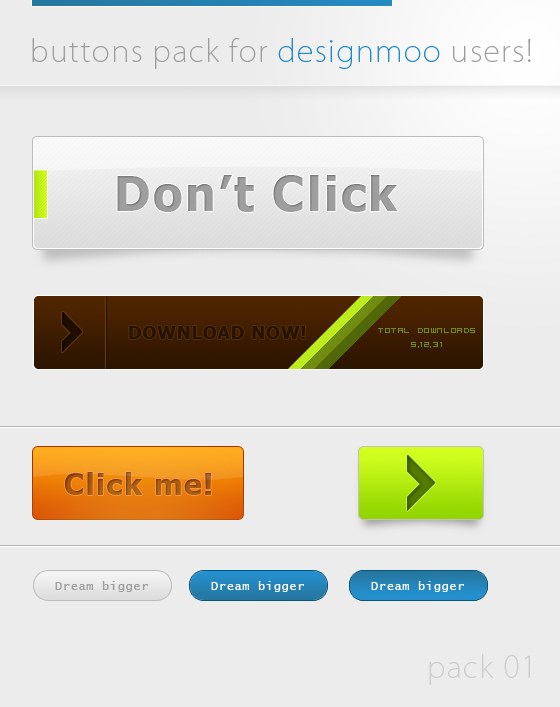
<style>
.page{position:relative;width:560px;height:707px;background:#ececec}
.page>*{position:absolute;margin:0}
.t1{font:48px "Tahoma-Bold";letter-spacing:0.05em;color:#9e9e9e}
.t2{font:18px "Tahoma-Bold";letter-spacing:0.05em;color:#251200}
.t3{font:12px "VisitorTT2BRK";letter-spacing:0.05em;color:#708d12}
.t4{font:30px "Tahoma-Bold";letter-spacing:0.05em;color:#a65911}
.t5{font:12px "LucidaConsole";letter-spacing:0.05em;color:#9e9e9e}
.t6{font:12px "LucidaConsole";letter-spacing:0.05em;color:#ffffff}
</style>
<div class="page">
<p class="t1" style="left:117px;top:175px;width:281px;height:37px">Don’t Click</p>
<p class="t2" style="left:129px;top:326px;width:177px;height:13px">DOWNLOAD NOW!</p>
<p class="t3" style="left:378px;top:328px;width:97px;height:20px">Total Downloads<br>     5,12,31</p>
<p class="t4" style="left:65px;top:472px;width:146px;height:23px">Click me!</p>
<p class="t5" style="left:55px;top:581px;width:93px;height:11px">Dream bigger</p>
<p class="t6" style="left:211px;top:581px;width:93px;height:11px">Dream bigger</p>
<p class="t6" style="left:371px;top:581px;width:93px;height:11px">Dream bigger</p>
</div>
